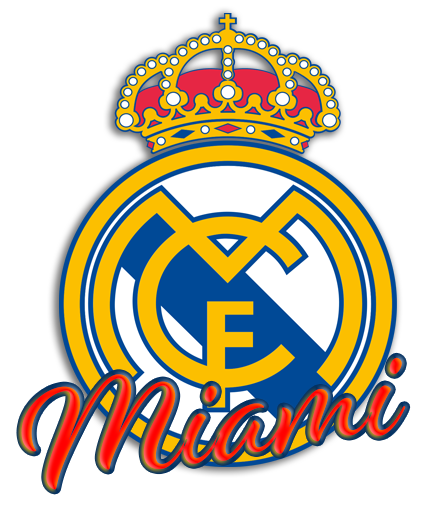
<style>
.page{position:relative;width:422px;height:514px;background:#ffffff}
.page>*{position:absolute;margin:0}
.t1{font:150px "Alisha-Regular"}
</style>
<div class="page">
<p class="t1" style="left:21px;top:357px;width:385px;height:133px;rotate:-9deg">Miami</p>
</div>
